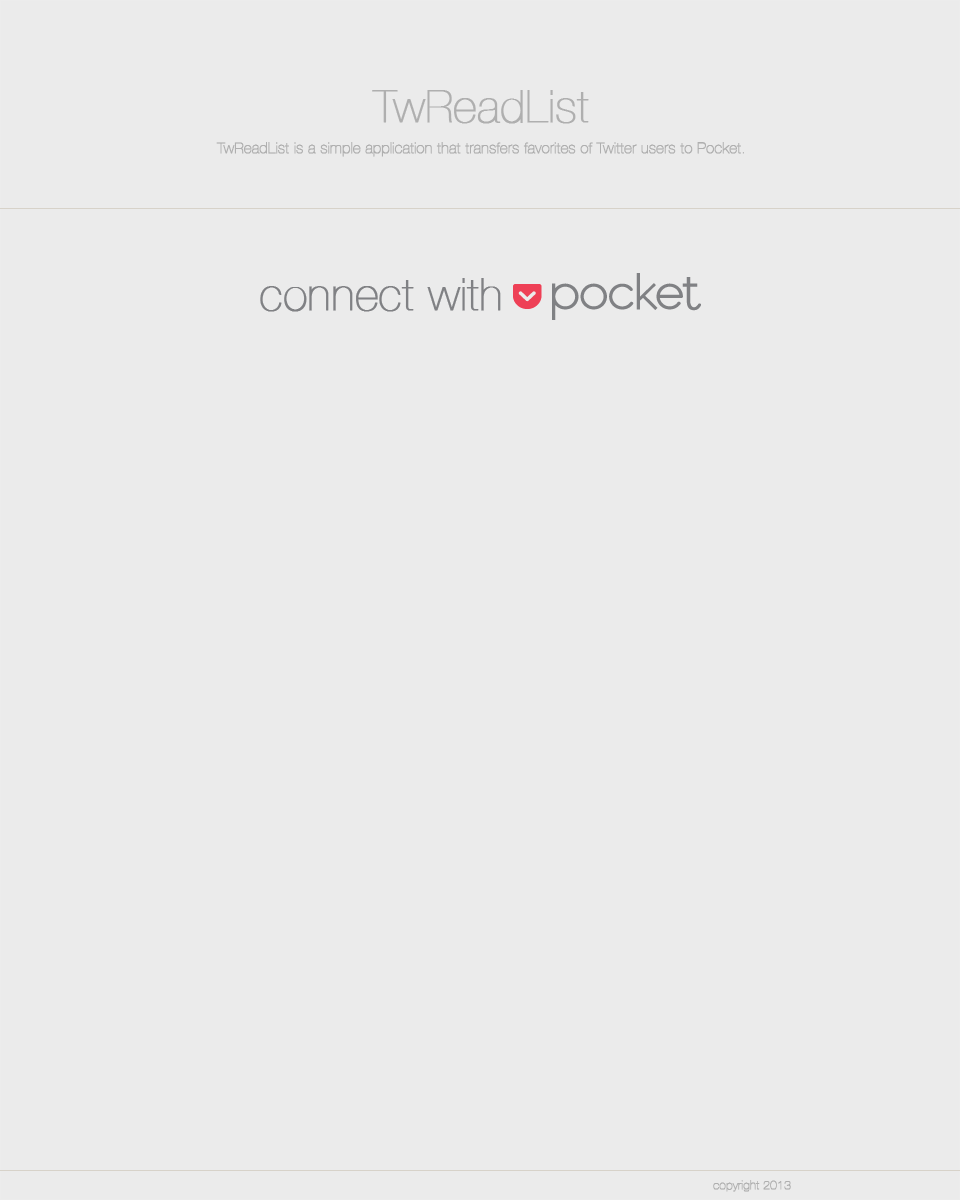
<style>
.page{position:relative;width:960px;height:1200px;background:#ebebeb}
.page>*{position:absolute;margin:0}
.t1{font:45px "HelveticaNeue-UltraLight";color:#afafaf;font-weight:bold}
.t2{font:15px "HelveticaNeue-UltraLight";color:#afafaf;font-weight:bold}
.t3{font:12px "HelveticaNeue-UltraLight";color:#afafaf;font-weight:bold}
</style>
<div class="page">
<p class="t1" style="left:372px;top:90px;width:217px;height:34px">TwReadList</p>
<p class="t2" style="left:216px;top:142px;width:528px;height:15px">TwReadList is a simple application that transfers favorites of Twitter users to Pocket.</p>
<p class="t3" style="left:713px;top:1180px;width:78px;height:12px">copyright 2013</p>
</div>
